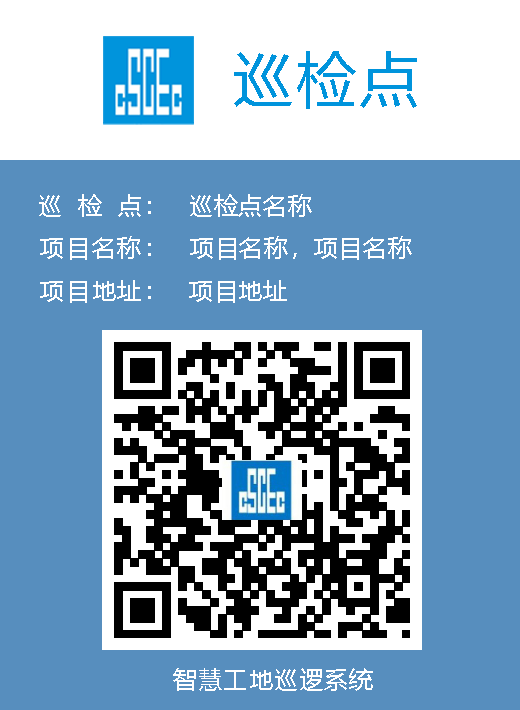
<style>
.page{position:relative;width:520px;height:710px;background:#578ebe}
.page>*{position:absolute;margin:0}
.t1{font:60px "MicrosoftYaHei";letter-spacing:0.05em;color:#0094dc}
.t2{font:24px "MicrosoftYaHei";letter-spacing:0.03em;color:#ffffff}
.t3{font:24px "MicrosoftYaHei";letter-spacing:0.075em;color:#ffffff}
.t4{font:24px "MicrosoftYaHei";letter-spacing:0.05em;color:#ffffff}
</style>
<div class="page">
<p class="t1" style="left:234px;top:51px;width:183px;height:58px">巡检点</p>
<p class="t2" style="left:39px;top:194px;width:112px;height:23px">巡  检  点：</p>
<p class="t2" style="left:190px;top:194px;width:122px;height:23px">巡检点名称</p>
<p class="t3" style="left:40px;top:236px;width:111px;height:24px">项目名称：</p>
<p class="t2" style="left:190px;top:236px;width:222px;height:24px">项目名称，项目名称</p>
<p class="t3" style="left:40px;top:280px;width:111px;height:23px">项目地址：</p>
<p class="t2" style="left:189px;top:280px;width:98px;height:23px">项目地址</p>
<p class="t4" style="left:173px;top:668px;width:200px;height:23px">智慧工地巡逻系统</p>
</div>
